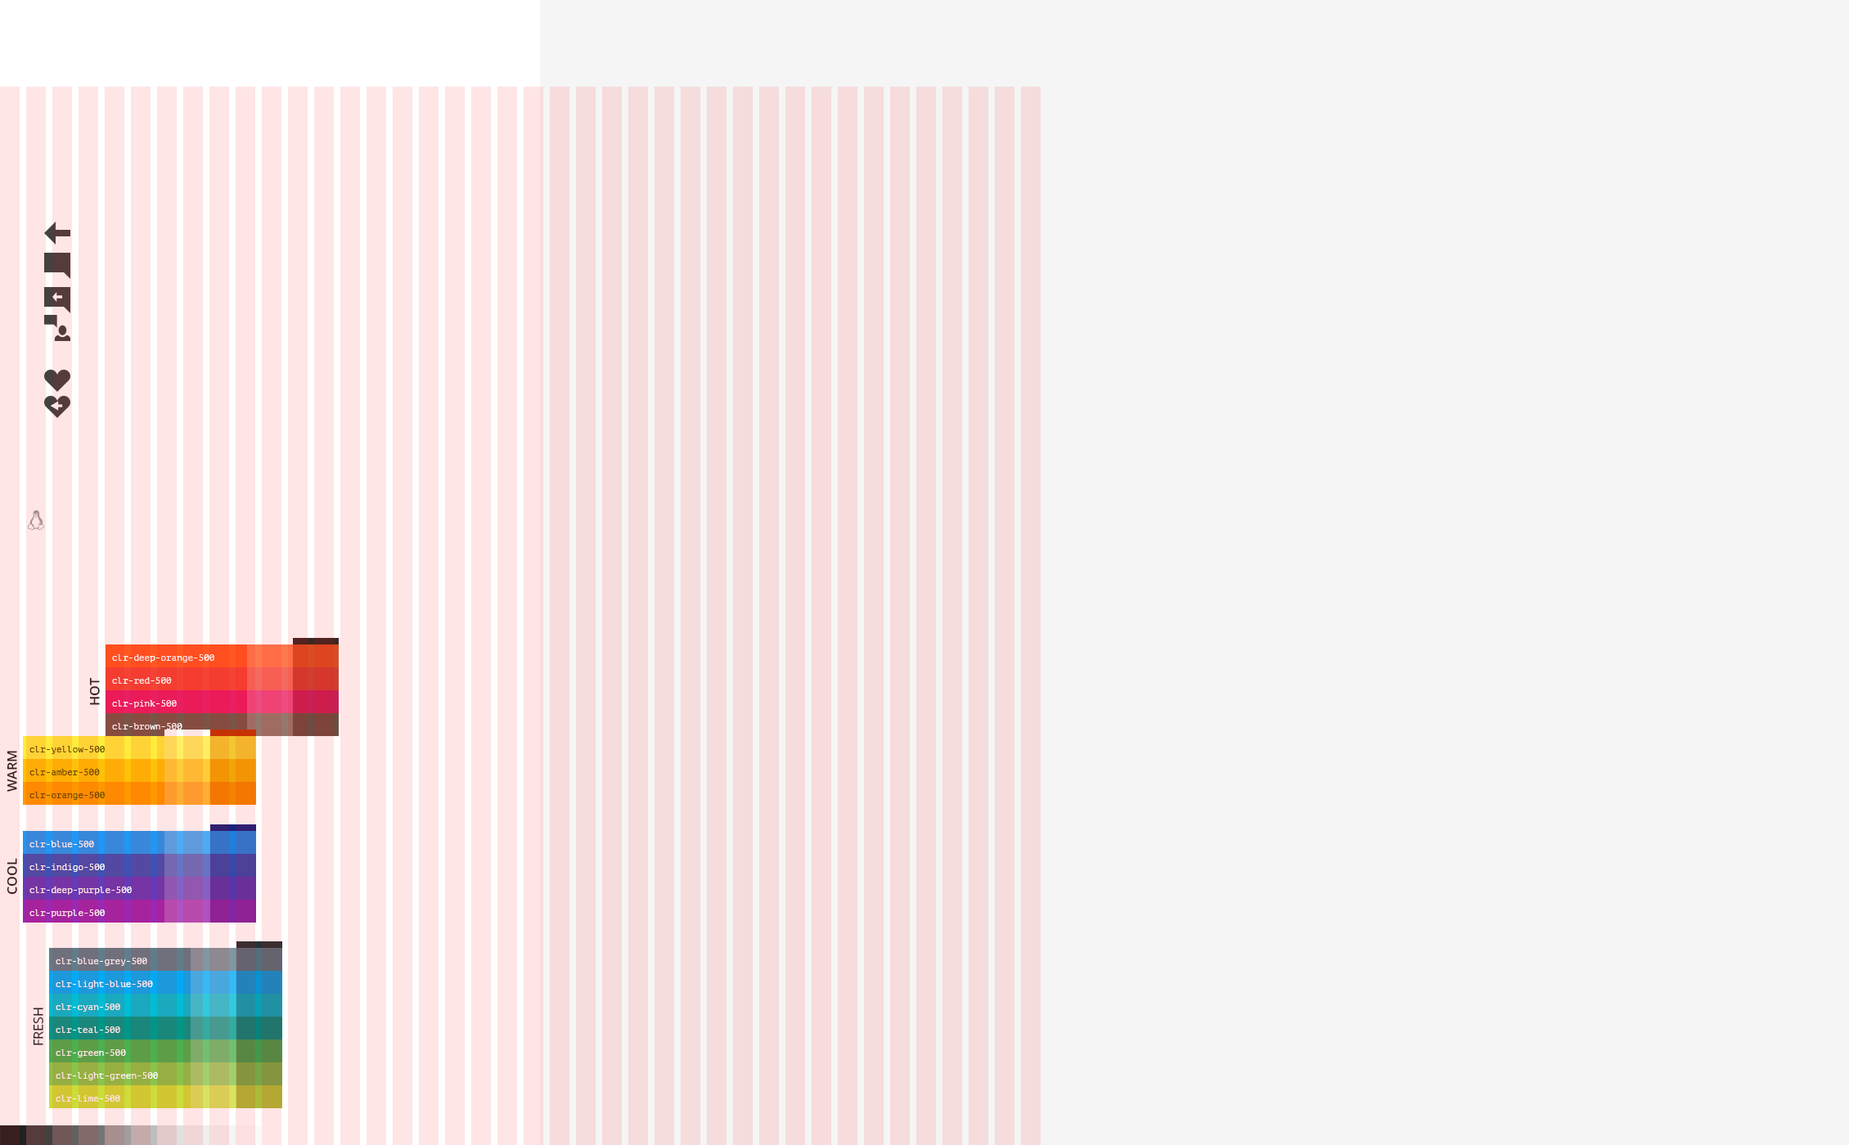
<style>
.page{position:relative;width:1849px;height:1145px;background:#f5f5f5}
.page>*{position:absolute;margin:0}
.t1{font:9px "PTMono-Regular";color:#ffe5e5}
.t2{font:13.1px "OpenSans-Semibold";color:#212121}
.t3{font:9px "PTMono-Regular";color:#644c03}
.t4{font:13.1px "OpenSans";color:#212121}
</style>
<div class="page">
<p class="t1" style="left:112px;top:655px;width:102px;height:8px">clr-deep-orange-500</p>
<p class="t2" style="left:89px;top:677px;width:11px;height:28px;rotate:-90deg">HOT</p>
<p class="t1" style="left:112px;top:677px;width:60px;height:7px">clr-red-500</p>
<p class="t1" style="left:112px;top:700px;width:65px;height:9px">clr-pink-500</p>
<p class="t1" style="left:112px;top:723px;width:70px;height:7px">clr-brown-500</p>
<p class="t3" style="left:29px;top:746px;width:76px;height:8px">clr-yellow-500</p>
<p class="t2" style="left:7px;top:751px;width:10px;height:41px;rotate:-90deg">WARM</p>
<p class="t3" style="left:29px;top:769px;width:71px;height:7px">clr-amber-500</p>
<p class="t3" style="left:29px;top:792px;width:76px;height:8px">clr-orange-500</p>
<p class="t1" style="left:29px;top:841px;width:65px;height:7px">clr-blue-500</p>
<p class="t2" style="left:7px;top:858px;width:10px;height:37px;rotate:-90deg">COOL</p>
<p class="t1" style="left:29px;top:864px;width:76px;height:8px">clr-indigo-500</p>
<p class="t1" style="left:29px;top:887px;width:103px;height:8px">clr-deep-purple-500</p>
<p class="t1" style="left:29px;top:910px;width:76px;height:8px">clr-purple-500</p>
<p class="t1" style="left:56px;top:958px;width:91px;height:8px">clr-blue-grey-500</p>
<p class="t1" style="left:56px;top:981px;width:97px;height:8px">clr-light-blue-500</p>
<p class="t4" style="left:33px;top:1008px;width:10px;height:38px;rotate:-90deg">FRESH</p>
<p class="t1" style="left:56px;top:1004px;width:64px;height:8px">clr-cyan-500</p>
<p class="t1" style="left:56px;top:1027px;width:64px;height:6px">clr-teal-500</p>
<p class="t1" style="left:56px;top:1050px;width:70px;height:8px">clr-green-500</p>
<p class="t1" style="left:56px;top:1073px;width:102px;height:8px">clr-light-green-500</p>
<p class="t1" style="left:56px;top:1096px;width:64px;height:6px">clr-lime-500</p>
</div>
